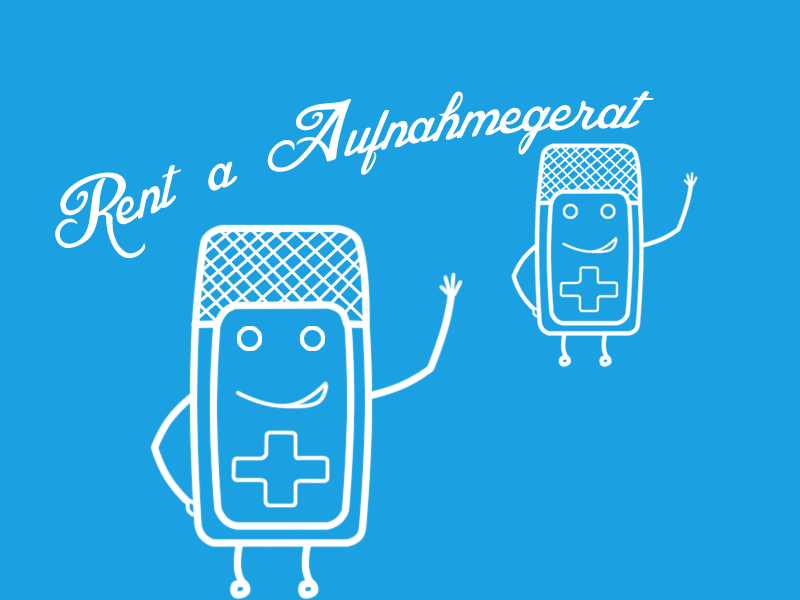
<style>
.page{position:relative;width:800px;height:600px;background:#1ba1e2}
.page>*{position:absolute;margin:0}
.t1{font:104.2px "BlessedDay";color:#ffffff}
</style>
<div class="page">
<p class="t1" style="left:55px;top:91px;width:599px;height:168px;rotate:-12deg">Rent  a  Aufnahmegerat</p>
</div>
